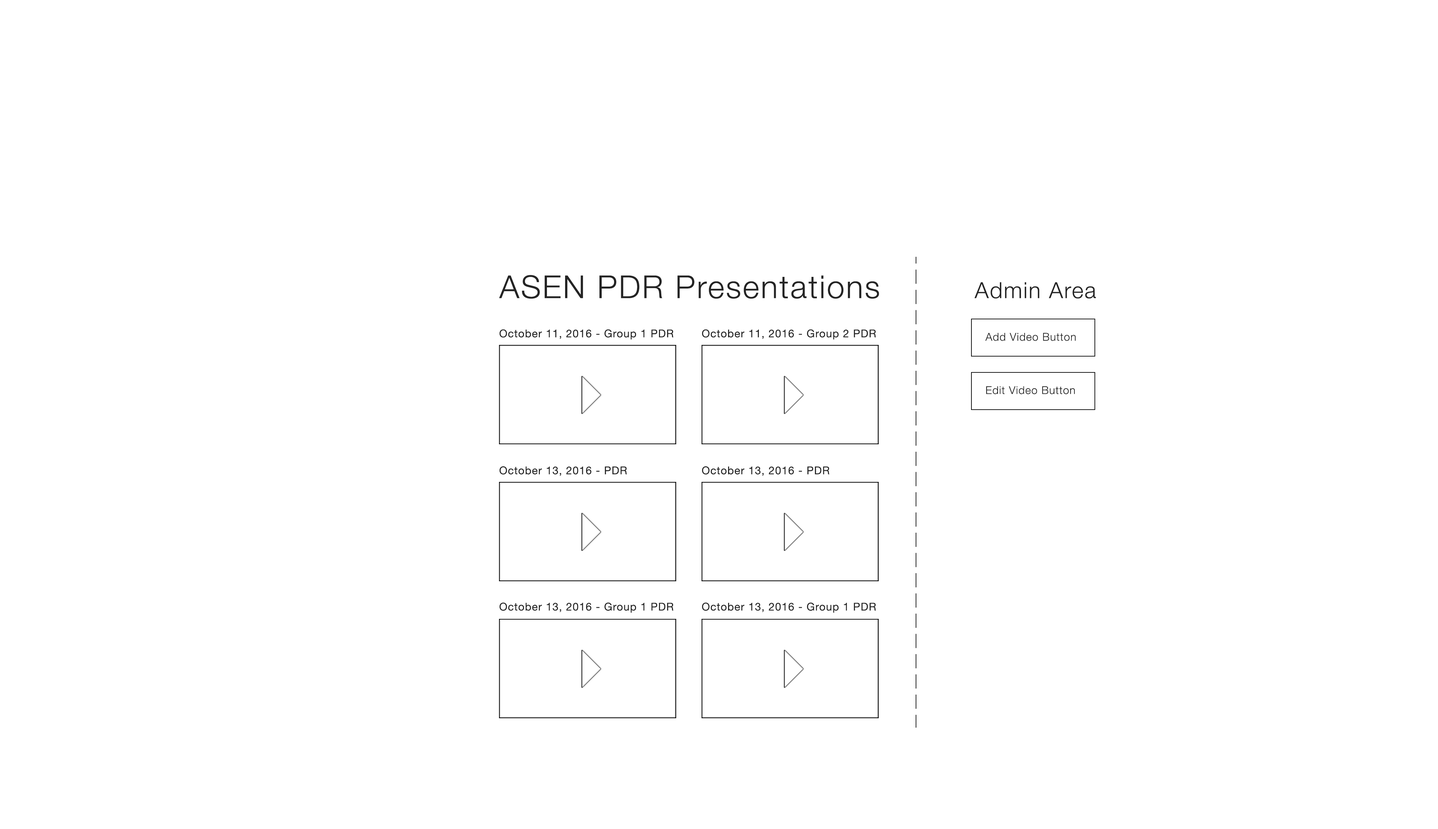
<style>
.page{position:relative;width:1438px;height:829px;background:#ffffff}
.page>*{position:absolute;margin:0}
.t1{font:31.7px "HelveticaNeue-Light";letter-spacing:0.05em;color:#242424}
.t2{font:22.3px "HelveticaNeue-Light";letter-spacing:0.05em;color:#242424}
.t3{font:10.8px "HelveticaNeue";letter-spacing:0.05em;color:#242424}
.t4{font:10.8px "HelveticaNeue-Light";letter-spacing:0.05em;color:#242424}
</style>
<div class="page">
<p class="t1" style="left:499px;top:275px;width:380px;height:24px">ASEN PDR Presentations</p>
<p class="t2" style="left:974px;top:282px;width:122px;height:17px">Admin Area</p>
<p class="t3" style="left:499px;top:329px;width:175px;height:11px">October 11, 2016 - Group 1 PDR</p>
<p class="t3" style="left:702px;top:329px;width:174px;height:11px">October 11, 2016 - Group 2 PDR</p>
<p class="t4" style="left:985px;top:333px;width:91px;height:8px">Add Video Button</p>
<p class="t4" style="left:986px;top:386px;width:89px;height:9px">Edit Video Button</p>
<p class="t3" style="left:499px;top:467px;width:128px;height:9px">October 13, 2016 - PDR</p>
<p class="t3" style="left:702px;top:467px;width:127px;height:9px">October 13, 2016 - PDR</p>
<p class="t3" style="left:499px;top:603px;width:175px;height:10px">October 13, 2016 - Group 1 PDR</p>
<p class="t3" style="left:702px;top:603px;width:174px;height:10px">October 13, 2016 - Group 1 PDR</p>
</div>
